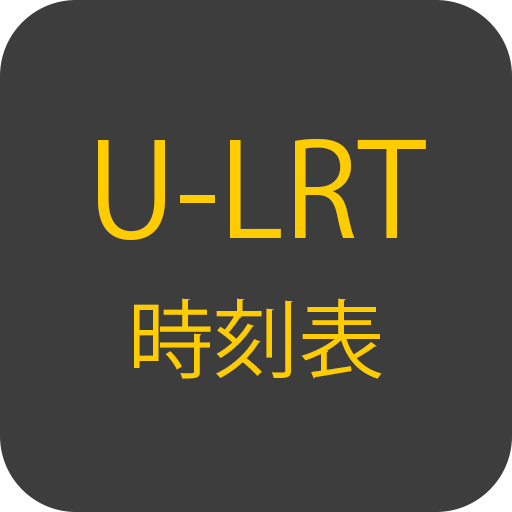
<style>
.page{position:relative;width:512px;height:512px;background:#3d3d3d}
.page>*{position:absolute;margin:0}
.t1{font:128px/170.7px "KozGoPr6N-Regular";color:#ffcc00}
.t2{font:85.3px/170.7px "KozGoPr6N-Regular";color:#ffcc00}
</style>
<div class="page">
<p class="t1" style="left:98px;top:138px;width:328px;height:241px;text-align:center">U-LRT<br><span class="t2">時刻表</span></p>
</div>
